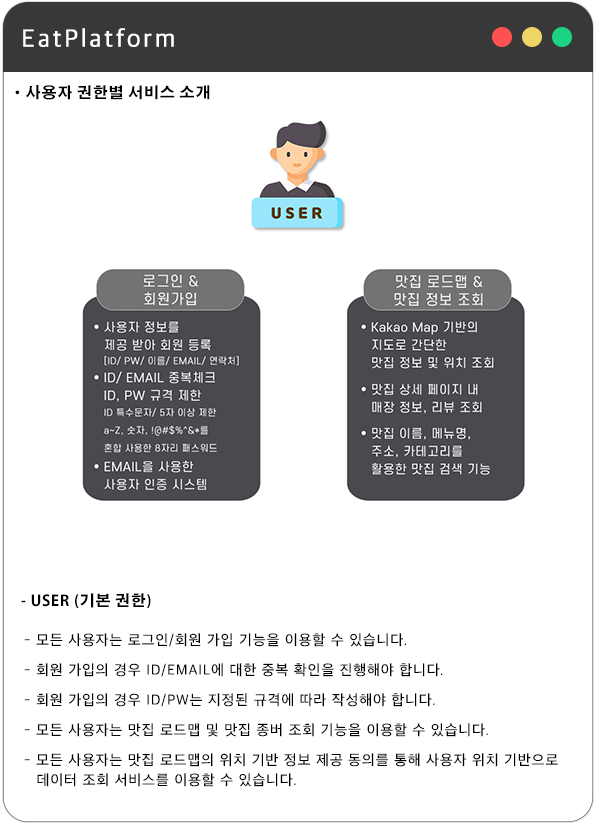
<style>
.page{position:relative;width:595px;height:825px;background:#ffffff}
.page>*{position:absolute;margin:0}
.t1{font:25px "AppleSDGothicNeoL00";letter-spacing:0.1em;color:#ffffff;font-weight:bold}
.t2{font:25px "AppleSDGothicNeoL00";letter-spacing:0.1em;color:#ffffff;font-variant:small-caps;font-weight:bold}
.t3{font:15px "AdobeGothicStd-Bold";letter-spacing:0.05em;color:#000000}
.t4{font:15px "AppleSDGothicNeoM00";letter-spacing:0.05em;color:#000000}
.t5{font:15px/19.8px "AppleSDGothicNeoM00";letter-spacing:0.05em;color:#000000}
</style>
<div class="page">
<p class="t1" style="left:23px;top:28px;width:151px;height:19px"><span class="t2">E</span>atPlatform</p>
<p class="t3" style="left:15px;top:85px;width:195px;height:15px">·사용자 권한별 서비스 소개</p>
<p class="t3" style="left:21px;top:593px;width:130px;height:15px">- USER (기본 권한)</p>
<p class="t4" style="left:24px;top:633px;width:382px;height:14px">- 모든 사용자는 로그인/회원 가입 기능을 이용할 수 있습니다.</p>
<p class="t4" style="left:24px;top:663px;width:419px;height:14px">- 회원 가입의 경우 ID/EMAIL에 대한 중복 확인을 진행해야 합니다.</p>
<p class="t4" style="left:24px;top:693px;width:411px;height:14px">- 회원 가입의 경우 ID/PW는 지정된 규격에 따라 작성해야 합니다.</p>
<p class="t4" style="left:24px;top:723px;width:464px;height:14px">- 모든 사용자는 맛집 로드맵 및 맛집 종버 조회 기능을 이용할 수 있습니다.</p>
<p class="t5" style="left:24px;top:753px;width:534px;height:34px">- 모든 사용자는 맛집 로드맵의 위치 기반 정보 제공 동의를 통해 사용자 위치 기반으로<br>   데이터 조회 서비스를 이용할 수 있습니다.</p>
</div>
